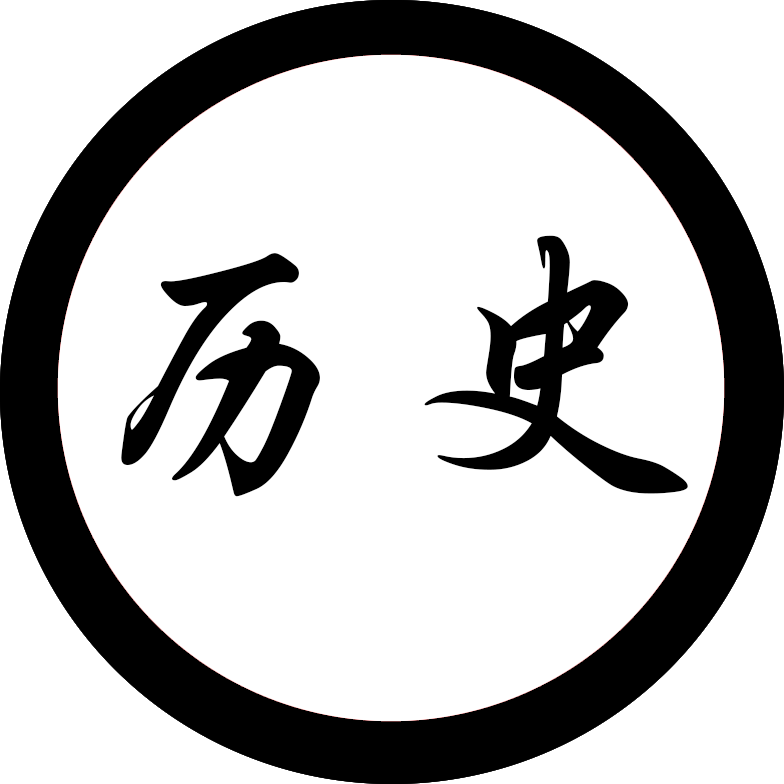
<style>
.page{position:relative;width:784px;height:784px;background:#ffffff}
.page>*{position:absolute;margin:0}
.t1{font:300px "STXingkai";color:#000000}
</style>
<div class="page">
<p class="t1" style="left:121px;top:235px;width:567px;height:262px">历史</p>
</div>
